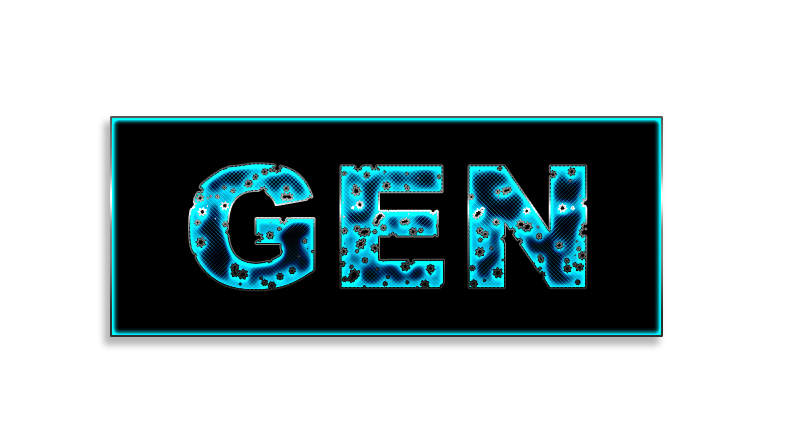
<style>
.page{position:relative;width:812px;height:446px;background:#ffffff}
.page>*{position:absolute;margin:0}
.t1{font:166.6px "Quasart";font-weight:bold}
</style>
<div class="page">
<p class="t1" style="left:189px;top:163px;width:398px;height:128px">GEN</p>
</div>
